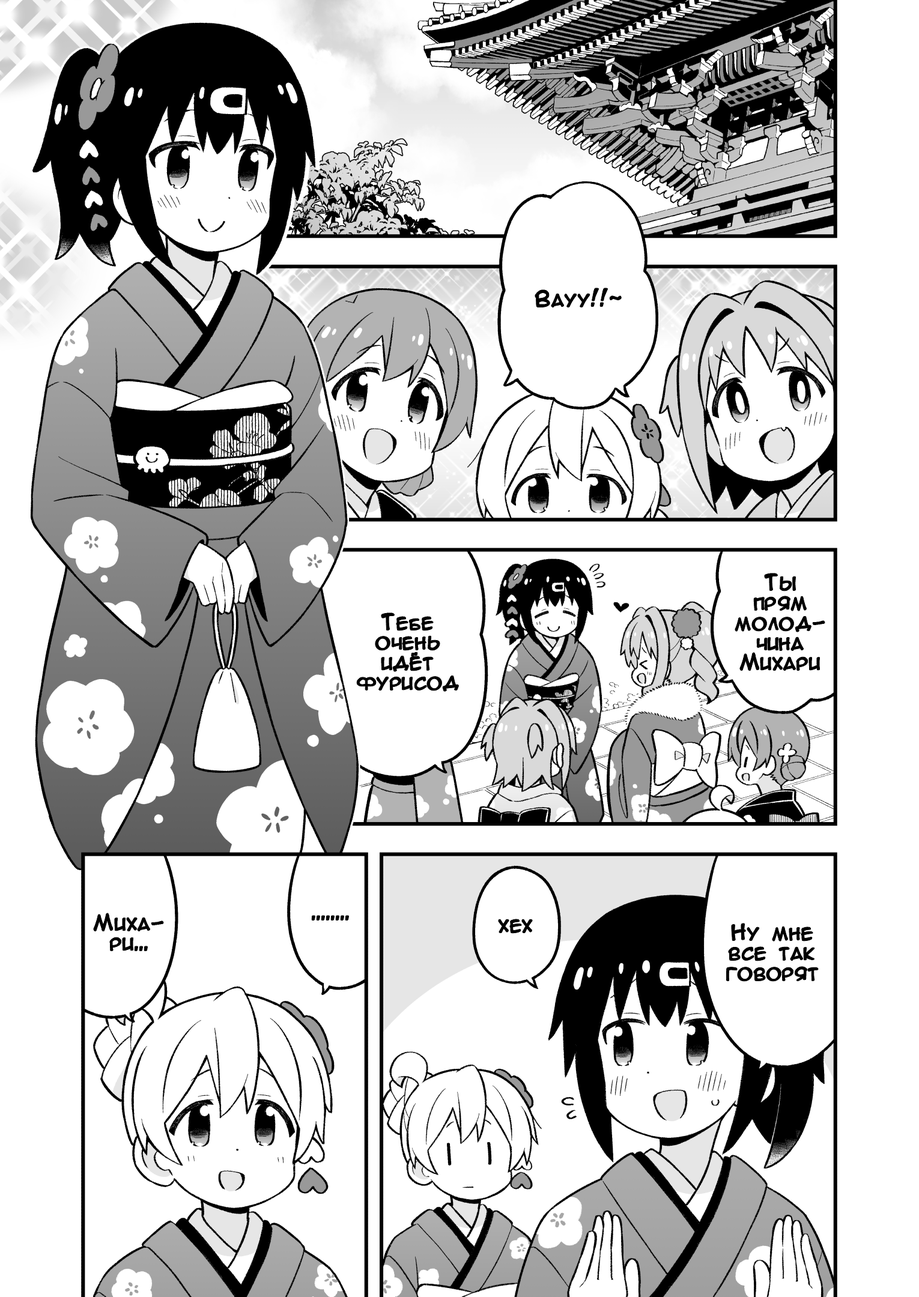
<style>
.page{position:relative;width:919px;height:1297px;background:#ffffff}
.page>*{position:absolute;margin:0}
.t1{font:20px "AnimeAcev3";color:#000000;font-weight:bold}
.t2{font:20px/20px "AnimeAcev3";color:#000000;font-weight:bold}
</style>
<div class="page">
<p class="t1" style="left:535px;top:288px;width:87px;height:20px">Вауу!!~</p>
<p class="t2" style="left:735px;top:574px;width:90px;height:97px;text-align:center">Ты<br>прям<br>молод-<br>чина<br>Михари</p>
<p class="t2" style="left:357px;top:613px;width:102px;height:78px;text-align:center">Тебе<br>очень<br>идёт<br>фурисод</p>
<p class="t2" style="left:94px;top:914px;width:69px;height:37px;text-align:center">Миха-<br>ри...</p>
<p class="t1" style="left:312px;top:916px;width:37px;height:5px">........</p>
<p class="t1" style="left:499px;top:920px;width:33px;height:13px">хех</p>
<p class="t2" style="left:726px;top:924px;width:92px;height:58px;text-align:center">Ну мне<br>все так<br>говорят</p>
</div>
